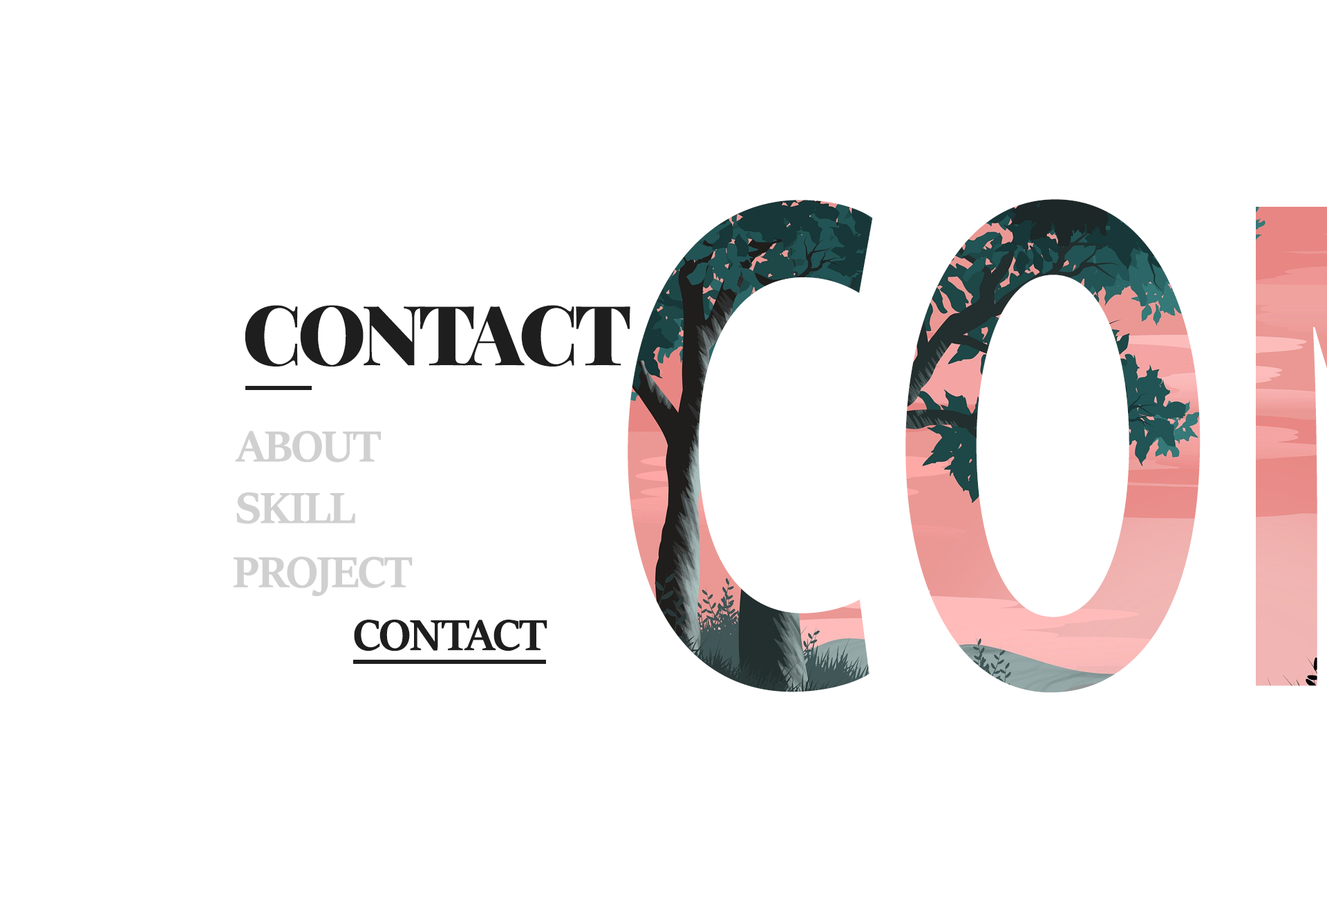
<style>
.page{position:relative;width:1327px;height:899px;background:#ffffff}
.page>*{position:absolute;margin:0}
.t1{font:82.9px "PlayfairDisplaySC-Black";letter-spacing:-0.05em;color:#1e1e1e}
.t2{font:48.4px "SitkaDisplay-Bold";letter-spacing:-0.025em;color:#d0d0d0}
.t3{font:48.4px "SitkaDisplay-Bold";letter-spacing:-0.025em;color:#1e1e1e}
</style>
<div class="page">
<p class="t1" style="left:245px;top:305px;width:385px;height:61px">CONTACT</p>
<p class="t2" style="left:235px;top:431px;width:146px;height:31px">ABOUT</p>
<p class="t2" style="left:236px;top:492px;width:119px;height:32px">SKILL</p>
<p class="t2" style="left:233px;top:556px;width:180px;height:40px">PROJECT</p>
<p class="t3" style="left:354px;top:619px;width:193px;height:32px">CONTACT</p>
</div>
